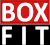
<style>
.page{position:relative;width:50px;height:45px;background:#000000}
.page>*{position:absolute;margin:0}
.t1{font:28.9px "Calibri-Bold";color:#ffffff;text-transform:uppercase;scale:0.94 1}
.t2{font:28.9px "Calibri-Bold";letter-spacing:0.275em;color:#ffffff;text-transform:uppercase;scale:0.94 1}
</style>
<div class="page">
<p class="t1" style="left:2px;top:2px;width:46px;height:20px">box</p>
<p class="t2" style="left:2px;top:26px;width:47px;height:19px">fit</p>
</div>
